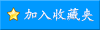
<style>
.page{position:relative;width:100px;height:30px;background:#0099ff}
.page>*{position:absolute;margin:0}
.t1{font:14px "-k-a-i-2";color:#ffffff}
</style>
<div class="page">
<p class="t1" style="left:24px;top:8px;width:70px;height:14px">加入收藏夹</p>
</div>
